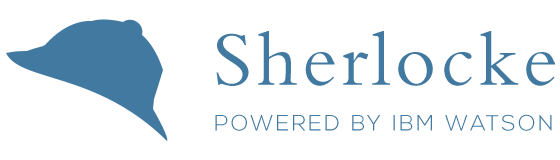
<style>
.page{position:relative;width:560px;height:160px;background:#ffffff}
.page>*{position:absolute;margin:0}
.t1{font:80px "BemboStd";letter-spacing:0.05em;color:#4179a1}
.t2{font:22px "NexaLight";letter-spacing:0.11em;color:#4179a1}
</style>
<div class="page">
<p class="t1" style="left:216px;top:31px;width:339px;height:55px">Sherlocke</p>
<p class="t2" style="left:215px;top:114px;width:337px;height:17px">POWERED BY IBM WATSON</p>
</div>
